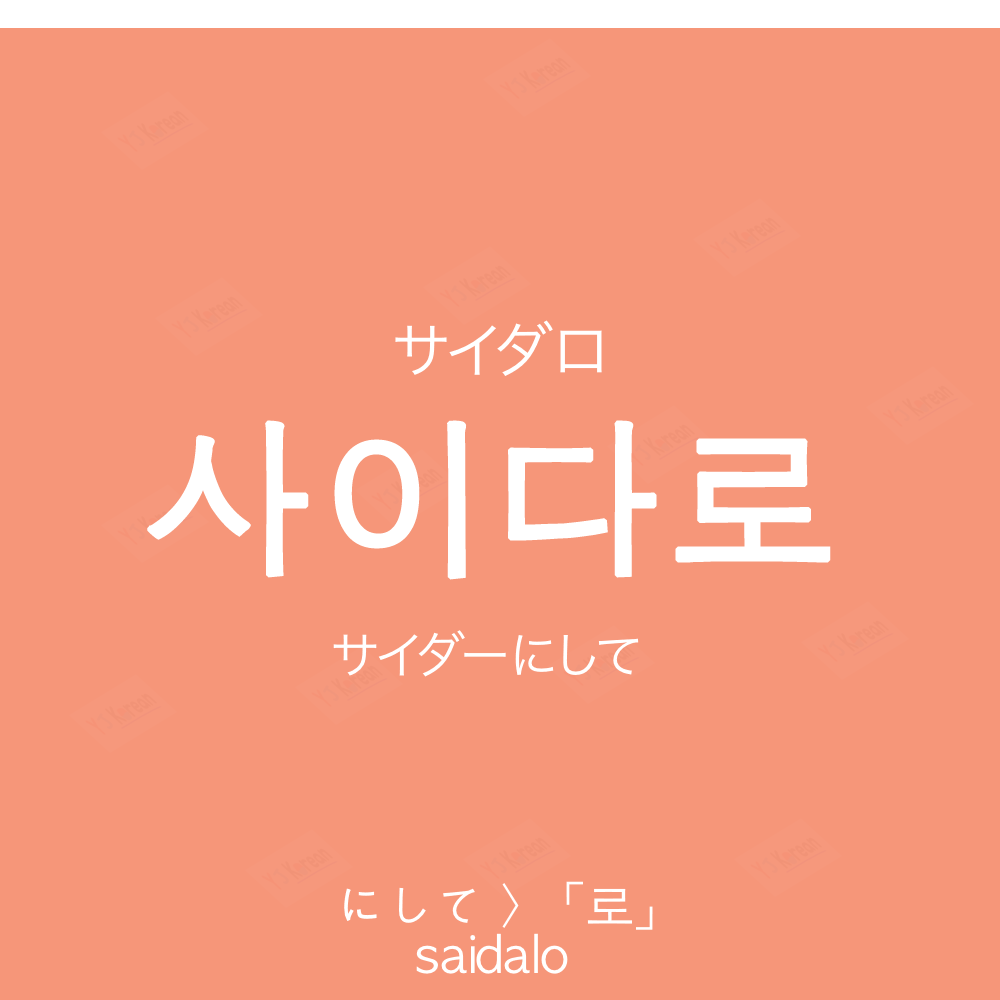
<style>
.page{position:relative;width:1000px;height:1000px;background:#f69679}
.page>*{position:absolute;margin:0}
.t1{font:60px "HiraKakuProN-W3";color:#ffffff;text-transform:uppercase}
.t2{font:170px "AppleGothic";color:#ffffff;font-weight:bold}
.t3{font:50px "HiraKakuProN-W3";color:#ffffff}
.t4{font:50px "AppleGothic";color:#ffffff}
</style>
<div class="page">
<p class="t1" style="left:395px;top:320px;width:207px;height:56px">サイダロ</p>
<p class="t2" style="left:147px;top:420px;width:684px;height:160px">사이다로</p>
<p class="t3" style="left:333px;top:630px;width:306px;height:47px">サイダーにして</p>
<p class="t4" style="left:344px;top:881px;width:309px;height:49px">にして＞「로」</p>
<p class="t4" style="left:416px;top:933px;width:152px;height:41px">saidalo</p>
</div>
